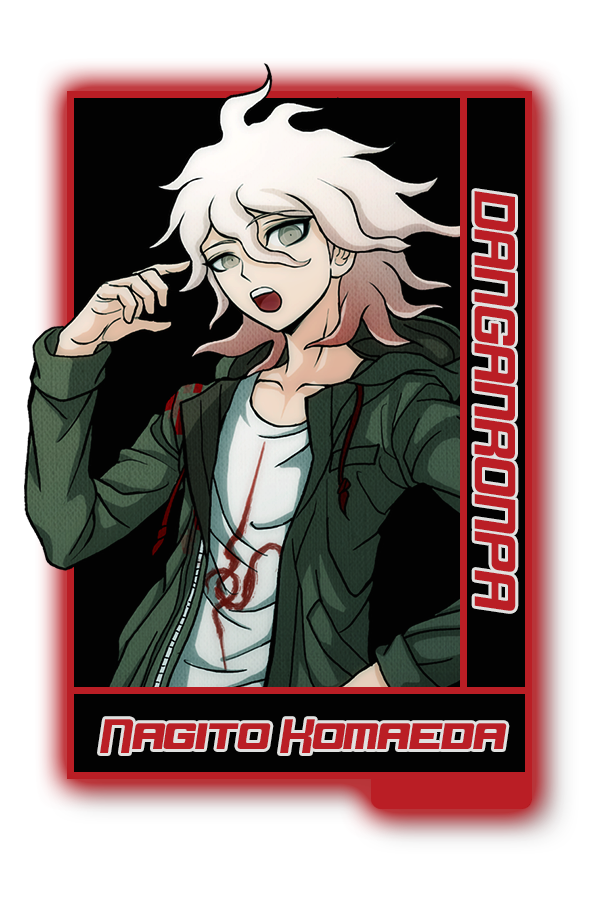
<style>
.page{position:relative;width:600px;height:900px;background:#020202}
.page>*{position:absolute;margin:0}
.t1{font:48.8px "DorBlue";color:#bb2c2e}
.t2{font:40.6px "DorBlue";color:#bb2c2e}
</style>
<div class="page">
<p class="t1" style="left:474px;top:191px;width:42px;height:420px;rotate:90deg">DANGANRONPA</p>
<p class="t2" style="left:100px;top:719px;width:407px;height:34px">Nagito Komaeda</p>
</div>
